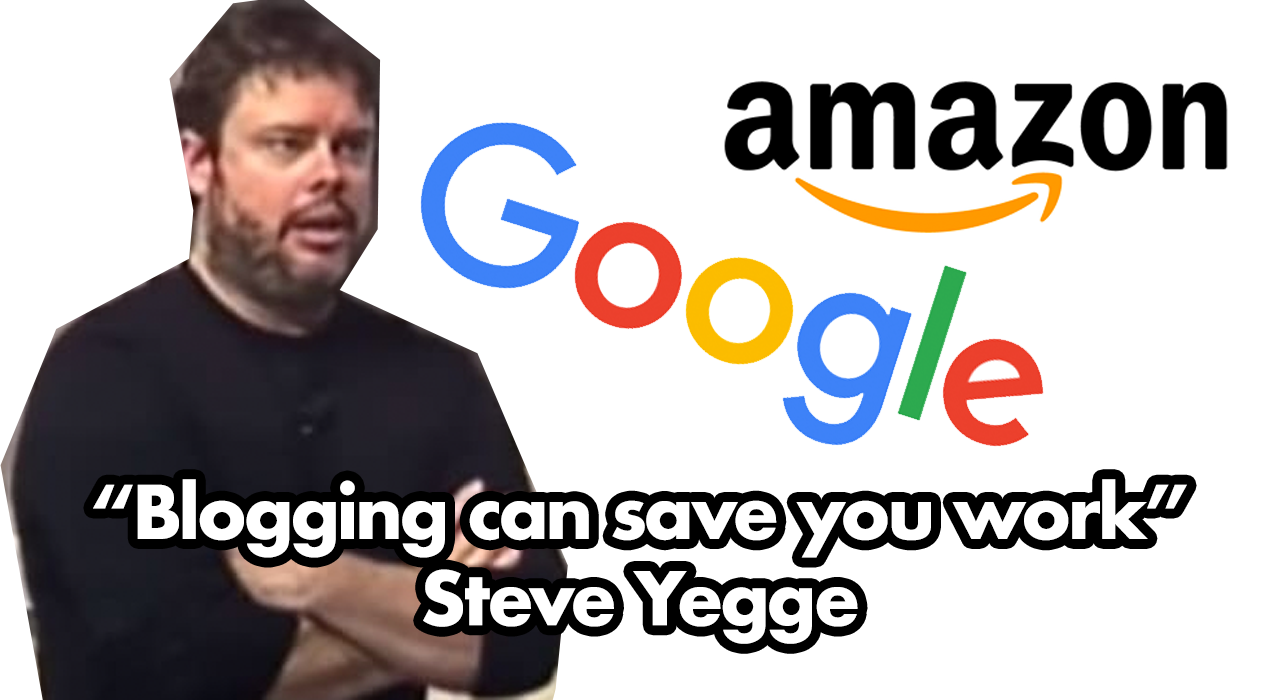
<style>
.page{position:relative;width:1280px;height:700px;background:#ffffff}
.page>*{position:absolute;margin:0}
.t1{font:72px "Futura-Bold";letter-spacing:-0.05em;color:#ffffff}
</style>
<div class="page">
<p class="t1" style="left:93px;top:479px;width:1094px;height:165px;text-align:center">“Blogging can save you work”                         Steve Yegge</p>
</div>
